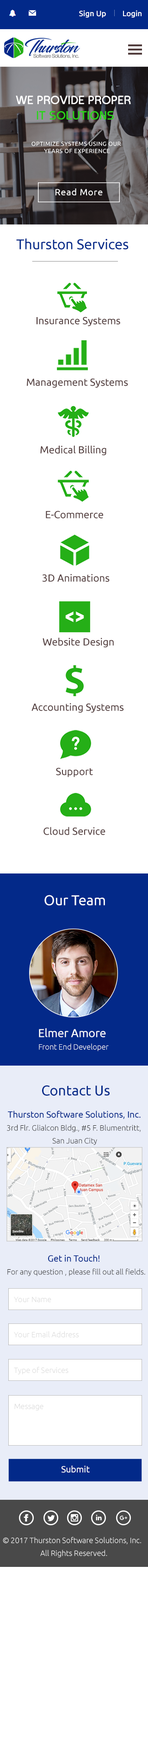
<style>
.page{position:relative;width:148px;height:1759px;background:#ffffff}
.page>*{position:absolute;margin:0}
.t1{font:7.7px "Ubuntu-Medium";color:#ffffff}
.t2{font:11.6px/15.4px "MeltixRegularDemo";letter-spacing:-0.005em;color:#ffffff;font-weight:bold}
.t3{font:11.6px/15.4px "MeltixRegularDemo";letter-spacing:-0.005em;color:#2ad319;font-weight:bold}
.t4{font:5.8px/7.2px "Ubuntu";letter-spacing:0.05em;color:#ffffff}
.t5{font:9px "Ubuntu";letter-spacing:0.05em;color:#ffffff}
.t6{font:14.1px "Ubuntu";letter-spacing:-0.005em;color:#022989}
.t7{font:10.3px "Ubuntu";letter-spacing:-0.005em;color:#523d3d}
.t8{font:14.1px "Ubuntu";letter-spacing:-0.005em;color:#ffffff}
.t9{font:11.6px "Ubuntu";letter-spacing:-0.005em;color:#ffffff}
.t10{font:7.7px "Ubuntu-Light";letter-spacing:-0.005em;color:#ffffff}
.t11{font:14.1px "Ubuntu";letter-spacing:-0.005em;color:#032989}
.t12{font:9px "Ubuntu";letter-spacing:-0.005em;color:#032989}
.t13{font:7.7px/12.9px "Ubuntu-Light";letter-spacing:-0.005em;color:#262626}
.t14{font:7.7px "Ubuntu-Light";letter-spacing:-0.005em;color:#262626}
.t15{font:7.7px "Ubuntu-Light";letter-spacing:-0.005em;color:#d9d9d9}
.t16{font:9px "Ubuntu";letter-spacing:-0.005em;color:#fbfbfb}
.t17{font:7.7px/12.9px "Ubuntu-Light";letter-spacing:-0.005em;color:#ffffff}
</style>
<div class="page">
<p class="t1" style="left:79px;top:10px;width:27px;height:8px">Sign Up</p>
<p class="t1" style="left:123px;top:10px;width:19px;height:8px">Login</p>
<p class="t2" style="left:16px;top:95px;width:115px;height:25px;text-align:center">WE PROVIDE PROPER <br><span class="t3">IT SOLUTIONS</span></p>
<p class="t4" style="left:31px;top:142px;width:90px;height:11px;text-align:center">OPTIMIZE SYSTEMS USING OUR<br> YEARS OF EXPERIENCE</p>
<p class="t5" style="left:56px;top:188px;width:47px;height:8px">Read More</p>
<p class="t6" style="left:16px;top:238px;width:113px;height:11px">Thurston Services</p>
<p class="t7" style="left:37px;top:317px;width:83px;height:9px">Insurance Systems</p>
<p class="t7" style="left:27px;top:378px;width:101px;height:10px">Management Systems</p>
<p class="t7" style="left:40px;top:445px;width:66px;height:10px">Medical Billing</p>
<p class="t7" style="left:46px;top:511px;width:57px;height:7px">E-Commerce</p>
<p class="t7" style="left:42px;top:574px;width:68px;height:8px">3D Animations</p>
<p class="t7" style="left:43px;top:637px;width:71px;height:11px">Website Design</p>
<p class="t7" style="left:31px;top:703px;width:93px;height:10px">Accounting Systems</p>
<p class="t7" style="left:56px;top:767px;width:37px;height:10px">Support</p>
<p class="t7" style="left:44px;top:827px;width:62px;height:8px">Cloud Service</p>
<p class="t8" style="left:44px;top:895px;width:61px;height:10px">Our Team</p>
<p class="t9" style="left:39px;top:1028px;width:67px;height:9px">Elmer Amore</p>
<p class="t10" style="left:39px;top:1043px;width:70px;height:8px">Front End Developer</p>
<p class="t11" style="left:42px;top:1085px;width:68px;height:11px">Contact Us</p>
<p class="t12" style="left:8px;top:1110px;width:133px;height:9px">Thurston Software Solutions, Inc.</p>
<p class="t13" style="left:7px;top:1124px;width:134px;height:21px;text-align:center">3rd Flr. Glialcon Bldg., #5 F. Blumentritt,<br> San Juan City</p>
<p class="t12" style="left:48px;top:1254px;width:52px;height:8px">Get in Touch!</p>
<p class="t14" style="left:7px;top:1268px;width:138px;height:8px">For any question , please fill out all fields.</p>
<p class="t15" style="left:14px;top:1296px;width:37px;height:6px">Your Name</p>
<p class="t15" style="left:14px;top:1331px;width:65px;height:6px">Your Email Address</p>
<p class="t15" style="left:14px;top:1367px;width:55px;height:7px">Type of Services</p>
<p class="t15" style="left:14px;top:1403px;width:30px;height:7px">Message</p>
<p class="t16" style="left:61px;top:1465px;width:29px;height:8px">Submit</p>
<p class="t17" style="left:3px;top:1537px;width:138px;height:21px;text-align:center">© 2017 Thurston Software Solutions, Inc. <br> All Rights Reserved.</p>
</div>
